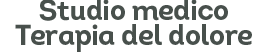
<style>
.page{position:relative;width:268px;height:52px;background:#ffffff}
.page>*{position:absolute;margin:0}
.t1{font:29.2px/25px "Intro-Bold-Alt";letter-spacing:-0.03em;color:#48504c}
</style>
<div class="page">
<p class="t1" style="left:15px;top:0px;width:237px;height:52px;text-align:center">Studio medico<br>Terapia del dolore</p>
</div>
